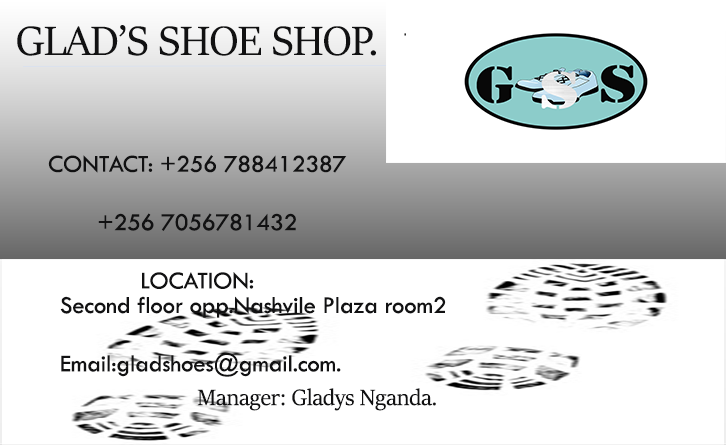
<style>
.page{position:relative;width:726px;height:445px;background:#ffffff}
.page>*{position:absolute;margin:0}
.t1{font:25px/58.4px "TwCenMT-Regular";letter-spacing:-0.01em;color:#111112}
.t2{font:45.9px/58.4px "SitkaBanner";letter-spacing:-0.01em;color:#111112}
.t3{font:25px/58.4px "SitkaBanner";letter-spacing:-0.01em;color:#111112}
.t4{font:25px/58.3px "TwCenMT-Regular";letter-spacing:-0.01em;color:#111112}
</style>
<div class="page">
<p class="t1" style="left:17px;top:25px;width:419px;height:386px;text-align:center"><span class="t2">GLAD’S SHOE SHOP.<br><br></span>CONTACT: +256 788412387<br>+256 7056781432<br>LOCATION:<br><br><span class="t3">Manager: Gladys Nganda.</span></p>
<p class="t4" style="left:60px;top:296px;width:386px;height:81px">Second floor opp.Nashvile Plaza room2<br>Email:gladshoes@gmail.com.</p>
</div>
